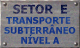
<style>
.page{position:relative;width:80px;height:48px}
.page>*{position:absolute;margin:0}
.t1{font:9.3px/10px "Tahoma-Bold";letter-spacing:0.025em;color:#102f84;text-transform:uppercase}
</style>
<div class="page">
<p class="t1" style="left:4px;top:17px;width:72px;height:27px;text-align:center">transporte <br>SUBTERRÂNEO<br>nÍvel a</p>
</div>
